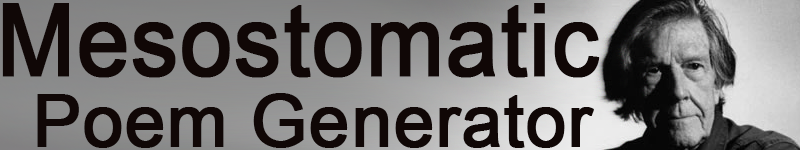
<style>
.page{position:relative;width:800px;height:150px;background:#100706}
.page>*{position:absolute;margin:0}
.t1{font:100px "ArialMT";color:#100706;font-weight:bold;scale:0.93 1}
.t2{font:72px "ArialMT";color:#100706;font-weight:bold}
</style>
<div class="page">
<p class="t1" style="left:2px;top:3px;width:598px;height:75px">Mesostomatic</p>
<p class="t2" style="left:37px;top:93px;width:557px;height:55px">Poem Generator</p>
</div>
